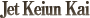
<style>
.page{position:relative;width:90px;height:18px;background:#ffffff}
.page>*{position:absolute;margin:0}
.t1{font:18px "RyuminPro-ExBold";letter-spacing:-0.08em;color:#4a3f32;font-weight:bold;scale:0.85 1}
</style>
<div class="page">
<p class="t1" style="left:0px;top:1px;width:90px;height:18px">Jet Keiun Kai</p>
</div>
